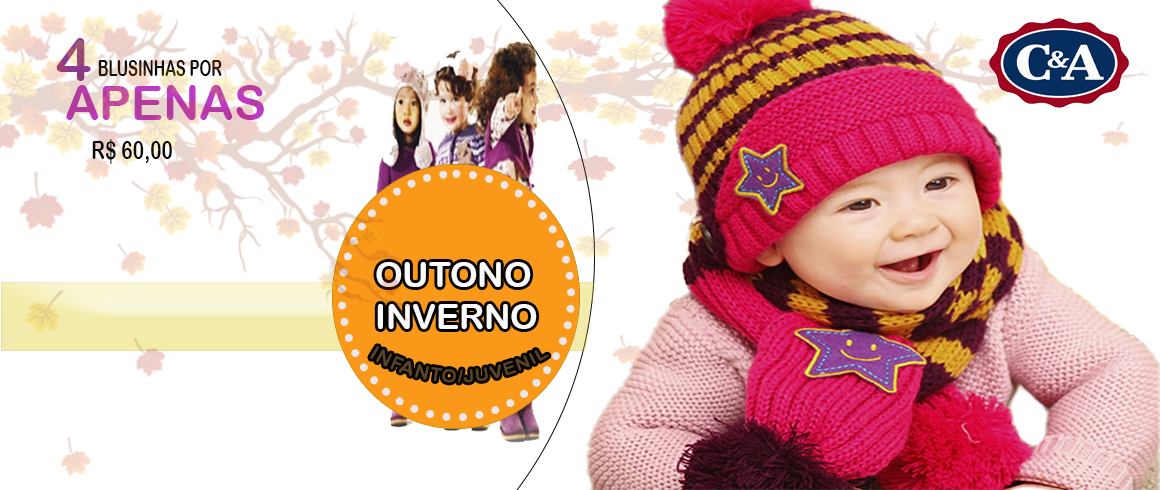
<style>
.page{position:relative;width:1160px;height:490px;background:#ffffff}
.page>*{position:absolute;margin:0}
.t1{font:60px "ArialRoundedMTBold"}
.t2{font:22.8px "ArialRoundedMTBold";scale:0.65 1}
.t3{font:48px "ArialRoundedMTBold"}
.t4{font:25.2px "ArialRoundedMTBold";color:#090909;scale:0.76 1}
.t5{font:35.1px "ArialRoundedMTBold";color:#fbfbfb}
</style>
<div class="page">
<p class="t1" style="left:56px;top:38px;width:35px;height:43px">4</p>
<p class="t2" style="left:98px;top:60px;width:124px;height:16px">BLUSINHAS POR</p>
<p class="t3" style="left:66px;top:85px;width:198px;height:35px">APENAS</p>
<p class="t4" style="left:92px;top:139px;width:80px;height:25px">R$ 60,00</p>
<p class="t5" style="left:376px;top:262px;width:161px;height:67px">OUTONO<br> INVERNO</p>
</div>
